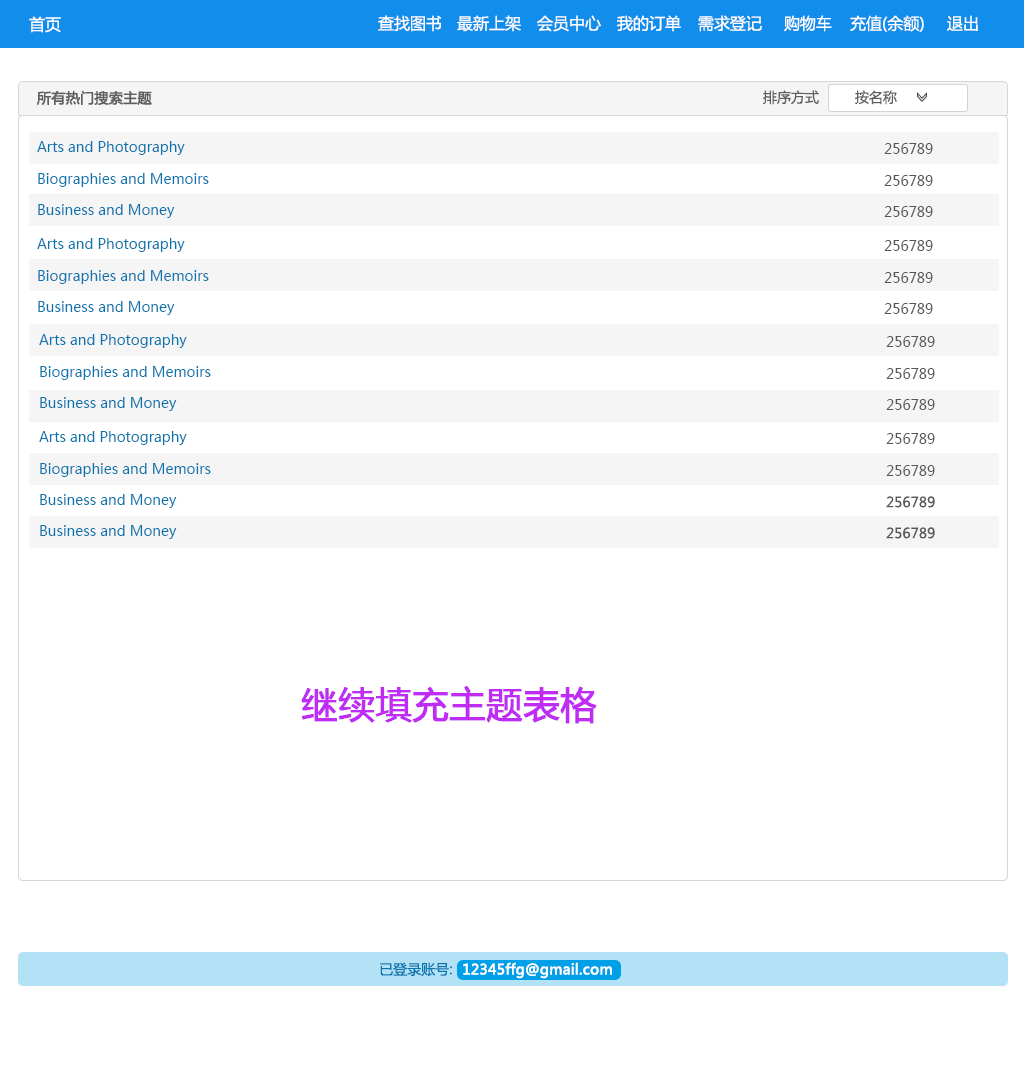
<style>
.page{position:relative;width:1024px;height:1080px;background:#ffffff}
.page>*{position:absolute;margin:0}
.t1{font:16px "MicrosoftYaHei";color:#ffffff}
.t2{font:14px "MicrosoftYaHei";color:#615e5e;font-weight:bold}
.t3{font:14px "MicrosoftYaHei";color:#615e5e}
.t4{font:14px "MicrosoftYaHei";color:#0875ae}
.t5{font:14px "MicrosoftYaHei";color:#575757}
.t6{font:36px "MicrosoftYaHei";color:#bf2df5;font-weight:bold}
.t7{font:14px "MicrosoftYaHei";color:#ffffff;font-weight:bold}
</style>
<div class="page">
<p class="t1" style="left:29px;top:16px;width:32px;height:17px">首页</p>
<p class="t1" style="left:378px;top:15px;width:64px;height:17px">查找图书</p>
<p class="t1" style="left:457px;top:15px;width:64px;height:17px">最新上架</p>
<p class="t1" style="left:537px;top:15px;width:64px;height:17px">会员中心</p>
<p class="t1" style="left:617px;top:15px;width:64px;height:17px">我的订单</p>
<p class="t1" style="left:698px;top:15px;width:64px;height:17px">需求登记</p>
<p class="t1" style="left:784px;top:15px;width:48px;height:17px">购物车</p>
<p class="t1" style="left:850px;top:15px;width:74px;height:17px">充值(余额)</p>
<p class="t1" style="left:947px;top:15px;width:31px;height:16px">退出</p>
<p class="t2" style="left:36px;top:90px;width:116px;height:15px">所有热门搜索主题</p>
<p class="t3" style="left:763px;top:90px;width:56px;height:15px">排序方式</p>
<p class="t3" style="left:855px;top:90px;width:42px;height:15px">按名称</p>
<p class="t4" style="left:37px;top:141px;width:148px;height:14px">Arts and Photography</p>
<p class="t5" style="left:884px;top:143px;width:49px;height:11px">256789</p>
<p class="t4" style="left:38px;top:173px;width:171px;height:14px">Biographies and Memoirs</p>
<p class="t5" style="left:884px;top:175px;width:49px;height:11px">256789</p>
<p class="t4" style="left:38px;top:204px;width:137px;height:14px">Business and Money</p>
<p class="t5" style="left:884px;top:206px;width:49px;height:11px">256789</p>
<p class="t4" style="left:37px;top:238px;width:148px;height:14px">Arts and Photography</p>
<p class="t5" style="left:884px;top:240px;width:49px;height:11px">256789</p>
<p class="t4" style="left:38px;top:270px;width:171px;height:14px">Biographies and Memoirs</p>
<p class="t5" style="left:884px;top:272px;width:49px;height:11px">256789</p>
<p class="t4" style="left:38px;top:301px;width:137px;height:14px">Business and Money</p>
<p class="t5" style="left:884px;top:303px;width:49px;height:11px">256789</p>
<p class="t4" style="left:39px;top:334px;width:148px;height:14px">Arts and Photography</p>
<p class="t5" style="left:886px;top:336px;width:49px;height:11px">256789</p>
<p class="t4" style="left:40px;top:366px;width:171px;height:14px">Biographies and Memoirs</p>
<p class="t5" style="left:886px;top:368px;width:49px;height:11px">256789</p>
<p class="t4" style="left:40px;top:397px;width:137px;height:14px">Business and Money</p>
<p class="t5" style="left:886px;top:399px;width:49px;height:11px">256789</p>
<p class="t4" style="left:39px;top:431px;width:148px;height:14px">Arts and Photography</p>
<p class="t5" style="left:886px;top:433px;width:49px;height:11px">256789</p>
<p class="t4" style="left:40px;top:463px;width:171px;height:14px">Biographies and Memoirs</p>
<p class="t5" style="left:886px;top:465px;width:49px;height:11px">256789</p>
<p class="t4" style="left:40px;top:494px;width:137px;height:14px">Business and Money</p>
<p class="t5" style="left:886px;top:496px;width:49px;height:12px">256789</p>
<p class="t4" style="left:40px;top:525px;width:137px;height:14px">Business and Money</p>
<p class="t5" style="left:886px;top:527px;width:49px;height:12px">256789</p>
<p class="t6" style="left:301px;top:686px;width:296px;height:38px">继续填充主题表格</p>
<p class="t4" style="left:380px;top:962px;width:72px;height:15px">已登录账号:</p>
<p class="t7" style="left:463px;top:962px;width:149px;height:17px">12345ffg@gmail.com</p>
</div>
